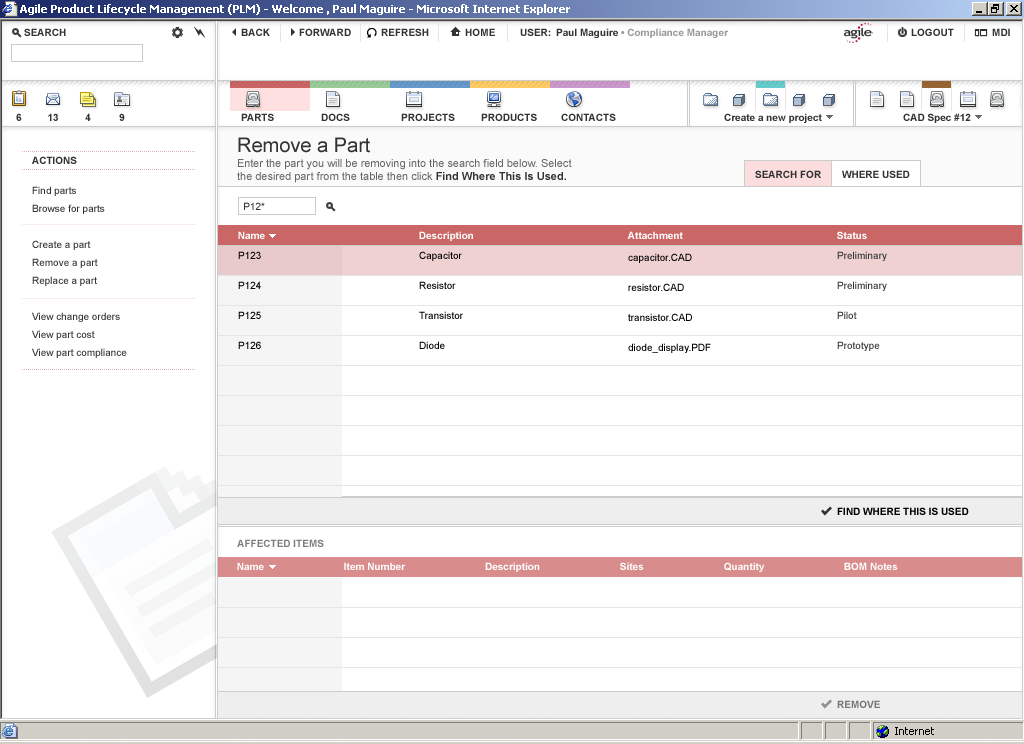
<style>
.page{position:relative;width:1024px;height:744px;background:#ffffff}
.page>*{position:absolute;margin:0}
.t1{font:20px "ArialMT";color:#333333}
.t2{font:10px "Arial-BoldMT";color:#333333}
.t3{font:11px "ArialMT";color:#666666}
.t4{font:11px "Arial-BoldMT";color:#333333}
.t5{font:10px/18px "ArialMT";color:#333333}
.t6{font:10px "ArialMT";color:#333333}
.t7{font:10px "Arial-BoldMT";color:#ffffff}
.t8{font:10px/10px "ArialMT";color:#000000}
.t9{font:10px/10px "ArialMT";color:#333333}
.t10{font:10px "Arial-BoldMT";color:#000000}
.t11{font:10px "Arial-BoldMT";color:#7f7f7f}
.t12{font:10px "Arial-BoldMT";color:#777777}
</style>
<div class="page">
<p class="t1" style="left:238px;top:137px;width:132px;height:16px">Remove a Part</p>
<p class="t2" style="left:32px;top:156px;width:45px;height:8px">ACTIONS</p>
<p class="t3" style="left:237px;top:159px;width:335px;height:24px">Enter the part you will be removing into the search field below. Select<br>the desired part from the table then click <span class="t4">Find Where This Is Used.</span></p>
<p class="t2" style="left:755px;top:170px;width:66px;height:8px">SEARCH FOR</p>
<p class="t2" style="left:842px;top:170px;width:68px;height:8px">WHERE USED</p>
<p class="t5" style="left:32px;top:186px;width:95px;height:172px">Find parts<br>Browse for parts<br><br>Create a part<br>Remove a part<br>Replace a part<br><br>View change orders<br>View part cost<br>View part compliance</p>
<p class="t6" style="left:244px;top:202px;width:21px;height:8px">P12*</p>
<p class="t7" style="left:238px;top:231px;width:27px;height:8px">Name</p>
<p class="t7" style="left:419px;top:231px;width:54px;height:10px">Description</p>
<p class="t7" style="left:627px;top:231px;width:56px;height:8px">Attachment</p>
<p class="t7" style="left:837px;top:231px;width:30px;height:8px">Status</p>
<p class="t8" style="left:238px;top:251px;width:23px;height:98px">P123<br><br><br>P124<br><br><br>P125<br><br><br>P126</p>
<p class="t8" style="left:419px;top:251px;width:44px;height:98px">Capacitor<br><br><br>Resistor<br><br><br>Transistor<br><br><br>Diode</p>
<p class="t8" style="left:628px;top:253px;width:83px;height:100px">capacitor.CAD<br><br><br>resistor.CAD<br><br><br>transistor.CAD<br><br><br>diode_display.PDF</p>
<p class="t9" style="left:837px;top:251px;width:50px;height:100px">Preliminary<br><br><br>Preliminary<br><br><br>Pilot<br><br><br>Prototype</p>
<p class="t10" style="left:837px;top:507px;width:132px;height:8px">FIND WHERE THIS IS USED</p>
<p class="t11" style="left:237px;top:539px;width:87px;height:8px">AFFECTED ITEMS</p>
<p class="t7" style="left:237px;top:562px;width:27px;height:8px">Name</p>
<p class="t7" style="left:344px;top:562px;width:62px;height:8px">Item Number</p>
<p class="t7" style="left:485px;top:562px;width:55px;height:10px">Description</p>
<p class="t7" style="left:620px;top:562px;width:24px;height:8px">Sites</p>
<p class="t7" style="left:724px;top:562px;width:41px;height:10px">Quantity</p>
<p class="t7" style="left:844px;top:562px;width:54px;height:8px">BOM Notes</p>
<p class="t12" style="left:837px;top:700px;width:43px;height:8px">REMOVE</p>
</div>
